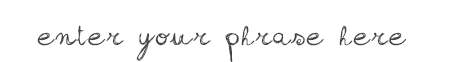
<style>
.page{position:relative;width:452px;height:62px;background:#ffffff}
.page>*{position:absolute;margin:0}
.t1{font:24px "sign-handwriting_demo-version";letter-spacing:0.11em;color:#434343}
</style>
<div class="page">
<p class="t1" style="left:37px;top:25px;width:370px;height:38px">enter your phrase here</p>
</div>
